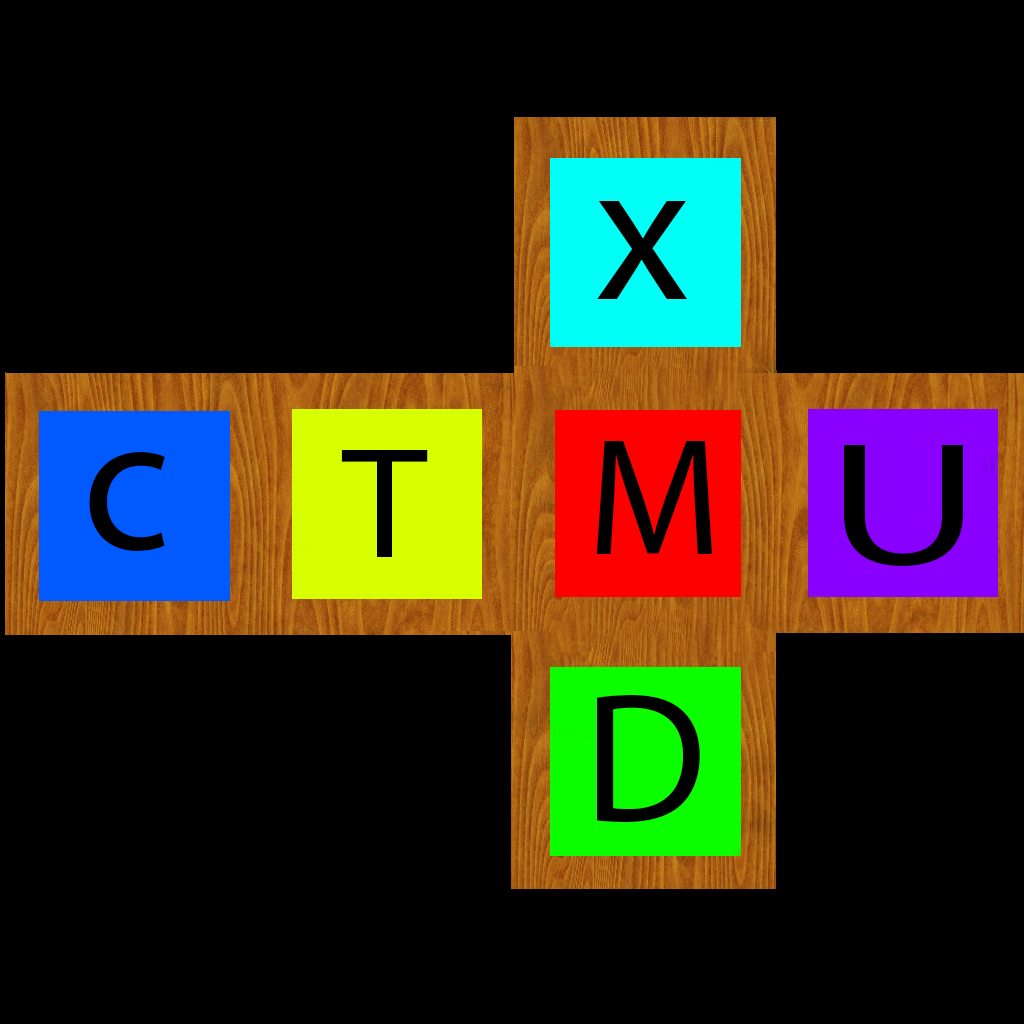
<style>
.page{position:relative;width:1024px;height:1024px;background:#000000}
.page>*{position:absolute;margin:0}
.t1{font:202.5px "MyriadPro-Regular";color:#000000}
.t2{font:167.7px "MyriadPro-Regular";color:#000000}
.t3{font:176.3px "MyriadPro-Regular";color:#000000;scale:1.36 1}
.t4{font:197.3px "MyriadPro-Regular";color:#000000}
.t5{font:158.1px "MyriadPro-Regular";color:#000000;scale:1.08 1}
.t6{font:185.4px "MyriadPro-Regular";color:#000000}
</style>
<div class="page">
<p class="t1" style="left:597px;top:201px;width:90px;height:98px">x</p>
<p class="t2" style="left:596px;top:441px;width:116px;height:113px">M</p>
<p class="t3" style="left:844px;top:445px;width:119px;height:121px">U</p>
<p class="t4" style="left:89px;top:452px;width:76px;height:99px">c</p>
<p class="t5" style="left:341px;top:450px;width:87px;height:107px">T</p>
<p class="t6" style="left:597px;top:695px;width:103px;height:127px">D</p>
</div>
